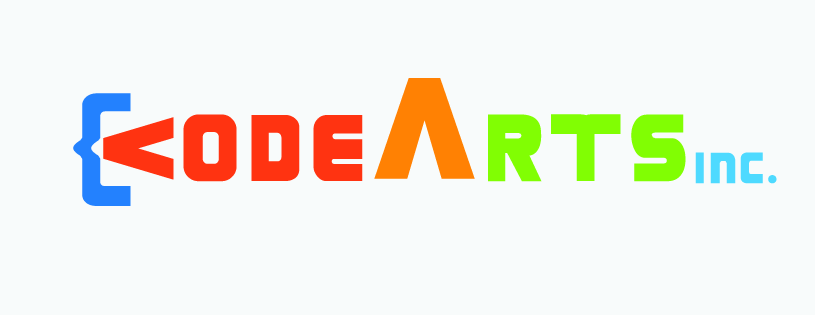
<style>
.page{position:relative;width:815px;height:315px;background:#f8fbfb}
.page>*{position:absolute;margin:0}
.t1{font:37.8px "Grungerocker";letter-spacing:0.075em;color:#4edaff}
.t2{font:82.4px "Grungerocker";letter-spacing:0.075em;color:#ff3311}
.t3{font:125px "Grungerocker";letter-spacing:0.075em;color:#ff8103}
.t4{font:82.4px "Grungerocker";letter-spacing:0.075em;color:#81fe03}
.t5{font:83.3px "Grungerocker";letter-spacing:0.075em;color:#2381fe}
.t6{font:261.1px "Grungerocker";letter-spacing:0.075em;color:#ff3311}
</style>
<div class="page">
<p class="t1" style="left:183px;top:78px;width:594px;height:106px"><span class="t2">ode</span><span class="t3">a</span><span class="t4">rts</span>inc.</p>
<p class="t5" style="left:73px;top:93px;width:58px;height:113px">{</p>
<p class="t6" style="left:103px;top:117px;width:71px;height:63px">&lt;</p>
</div>
